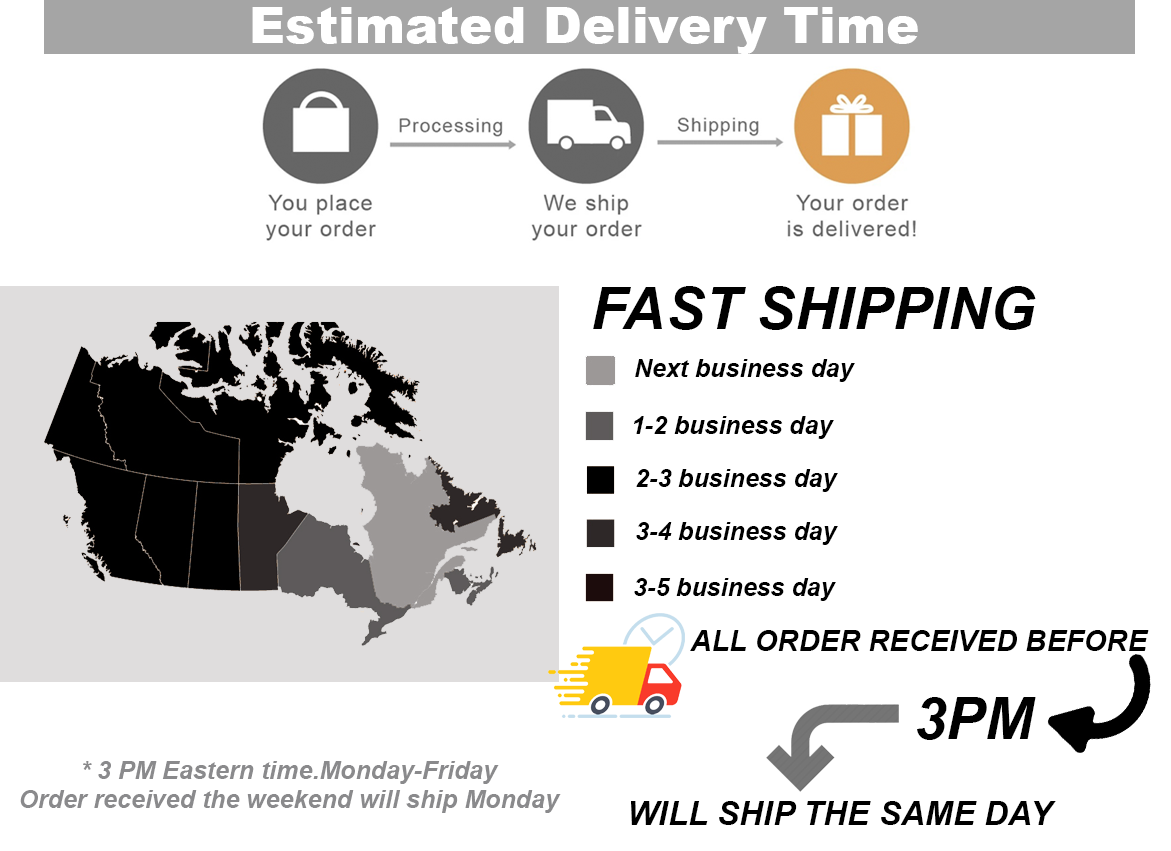
<style>
.page{position:relative;width:1171px;height:851px;background:#ffffff}
.page>*{position:absolute;margin:0}
.t1{font:50px "Arial-Black";color:#ffffff}
.t2{font:58.3px "Arial-BoldItalicMT";color:#000000}
.t3{font:25px "Arial-BoldItalicMT";color:#000000}
.t4{font:29.2px "Arial-BoldItalicMT";color:#000000}
.t5{font:25px "Arial-BoldItalicMT";color:#8a8a8c}
.t6{font:33.3px "Arial-BoldItalicMT";color:#000000}
</style>
<div class="page">
<p class="t1" style="left:252px;top:7px;width:666px;height:47px">Estimated Delivery Time</p>
<p class="t2" style="left:593px;top:286px;width:443px;height:44px">FAST SHIPPING</p>
<p class="t3" style="left:635px;top:359px;width:220px;height:23px">Next business day</p>
<p class="t3" style="left:634px;top:416px;width:200px;height:23px">1-2 business day</p>
<p class="t3" style="left:636px;top:469px;width:202px;height:23px">2-3 business day</p>
<p class="t3" style="left:636px;top:522px;width:202px;height:23px">3-4 business day</p>
<p class="t3" style="left:634px;top:578px;width:202px;height:23px">3-5 business day</p>
<p class="t4" style="left:690px;top:630px;width:459px;height:21px">ALL ORDER RECEIVED BEFORE</p>
<p class="t2" style="left:917px;top:697px;width:119px;height:43px">3PM</p>
<p class="t5" style="left:83px;top:761px;width:416px;height:23px">* 3 PM Eastern time.Monday-Friday</p>
<p class="t5" style="left:20px;top:790px;width:541px;height:23px">Order received the weekend will ship Monday</p>
<p class="t6" style="left:631px;top:801px;width:425px;height:24px">WILL SHIP THE SAME DAY</p>
</div>
